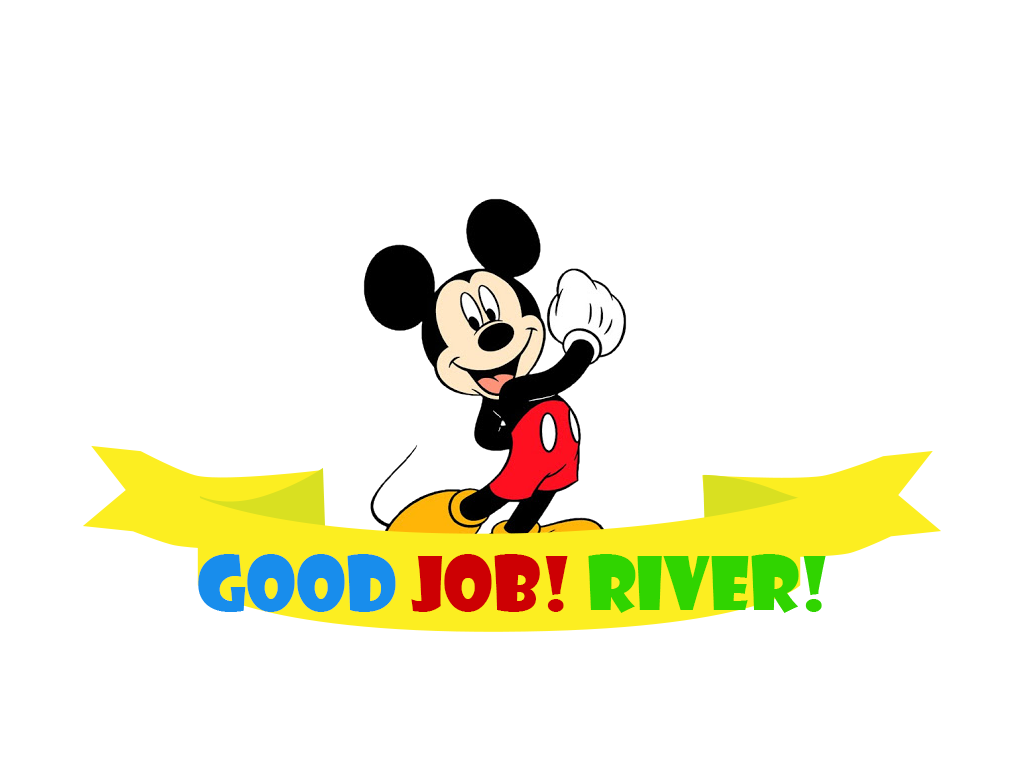
<style>
.page{position:relative;width:1024px;height:768px;background:#ffffff}
.page>*{position:absolute;margin:0}
.t1{font:72px "ShowcardGothic-Reg";color:#30d400}
.t2{font:72px "ShowcardGothic-Reg";color:#188dec}
.t3{font:72px "ShowcardGothic-Reg";color:#cd0003}
</style>
<div class="page">
<p class="t1" style="left:198px;top:554px;width:628px;height:59px"><span class="t2">Good</span><span class="t3"> Job! </span>River!</p>
</div>
